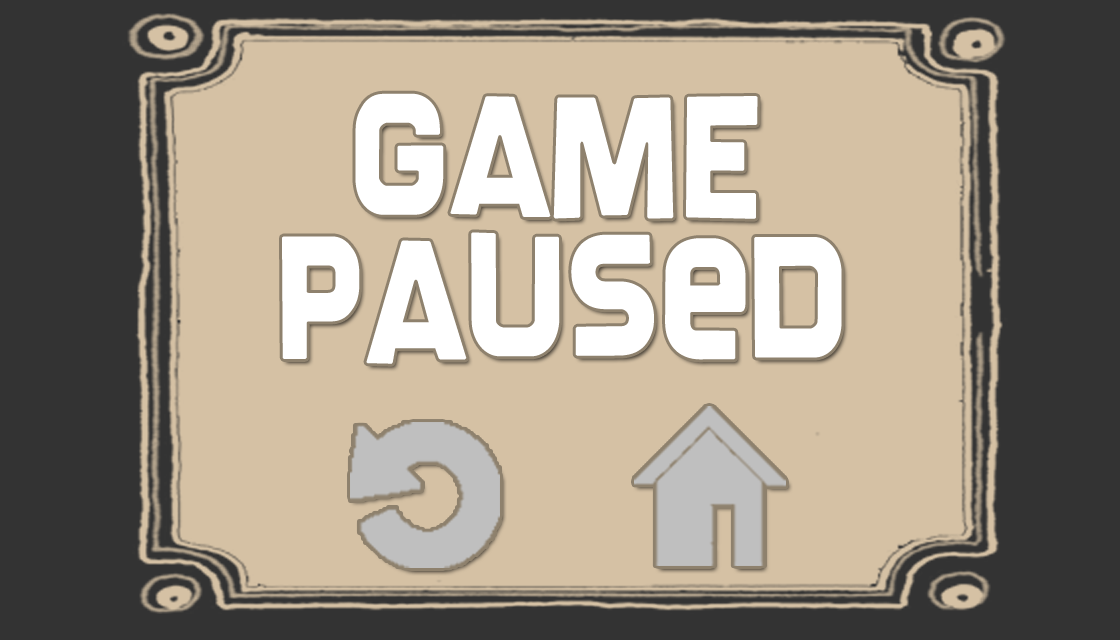
<style>
.page{position:relative;width:1120px;height:640px;background:#d5c1a4}
.page>*{position:absolute;margin:0}
.t1{font:180px "Screengem-Regular";color:#ffffff}
</style>
<div class="page">
<p class="t1" style="left:355px;top:93px;width:403px;height:126px">GAME</p>
<p class="t1" style="left:282px;top:232px;width:560px;height:132px">paused</p>
</div>
